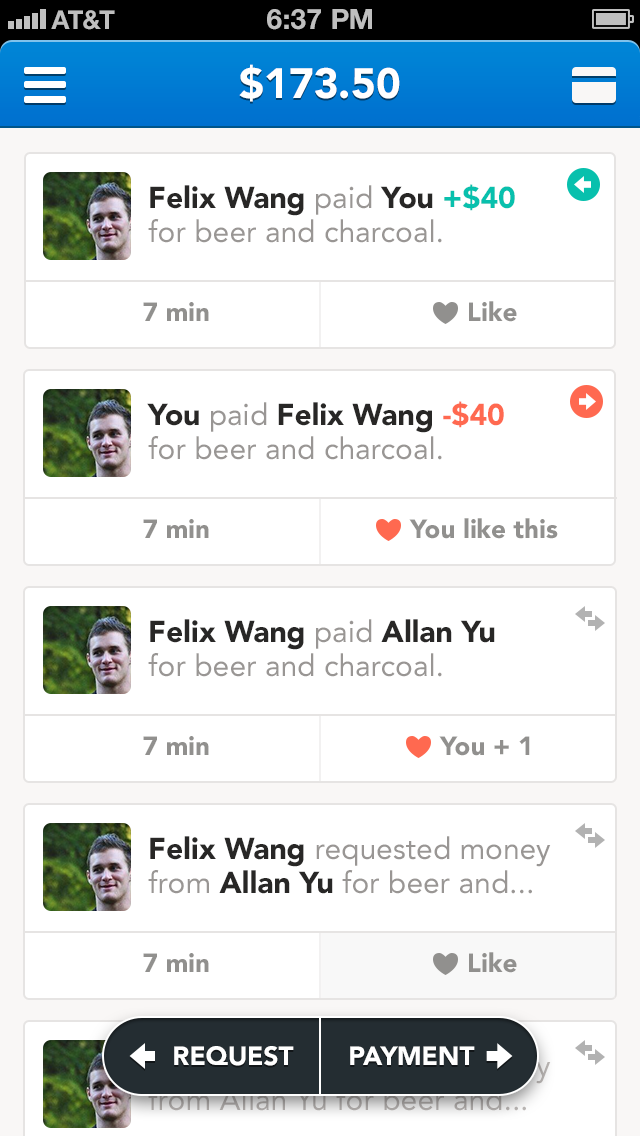
<style>
.page{position:relative;width:640px;height:1136px;background:#ffffff}
.page>*{position:absolute;margin:0}
.t1{font:42px "Avenir-Black";color:#ffffff}
.t2{font:30px/34px "Avenir-Roman";color:#999694}
.t3{font:30px/34px "Avenir-Black";color:#282726}
.t4{font:30px/34px "Avenir-Black";color:#08c0ad}
.t5{font:26px "Avenir-Black";color:#91908e}
.t6{font:30px/34px "Avenir-Black";color:#ff6950}
.t7{font:30px/34px "Avenir-Roman";color:#bdb9b7}
.t8{font:26px "Avenir-Black";color:#ffffff}
</style>
<div class="page">
<p class="t1" style="left:239px;top:64px;width:161px;height:38px">$173.50</p>
<p class="t2" style="left:148px;top:184px;width:367px;height:59px"><span class="t3">Felix Wang </span>paid <span class="t3">You </span><span class="t4">+$40 <br></span>for beer and charcoal.</p>
<p class="t5" style="left:143px;top:302px;width:66px;height:19px">7 min</p>
<p class="t5" style="left:469px;top:301px;width:48px;height:21px">Like</p>
<p class="t2" style="left:147px;top:401px;width:357px;height:59px"><span class="t3">You </span>paid <span class="t3">Felix Wang </span><span class="t6">-$40 <br></span>for beer and charcoal.</p>
<p class="t5" style="left:143px;top:519px;width:66px;height:19px">7 min</p>
<p class="t5" style="left:409px;top:518px;width:149px;height:21px">You like this</p>
<p class="t2" style="left:148px;top:619px;width:347px;height:58px"><span class="t3">Felix Wang </span>paid <span class="t3">Allan Yu <br></span>for beer and charcoal.</p>
<p class="t5" style="left:143px;top:736px;width:66px;height:19px">7 min</p>
<p class="t5" style="left:439px;top:736px;width:91px;height:20px">You + 1</p>
<p class="t7" style="left:148px;top:836px;width:403px;height:58px"><span class="t3">Felix Wang </span><span class="t2">requested money from </span><span class="t3">Allan Yu</span><span class="t2"> for beer and...<br></span>for beer and charcoal.</p>
<p class="t5" style="left:143px;top:953px;width:66px;height:19px">7 min</p>
<p class="t5" style="left:469px;top:952px;width:48px;height:21px">Like</p>
<p class="t8" style="left:174px;top:1046px;width:120px;height:20px">REQUEST</p>
<p class="t8" style="left:350px;top:1046px;width:125px;height:19px">PAYMENT</p>
</div>
